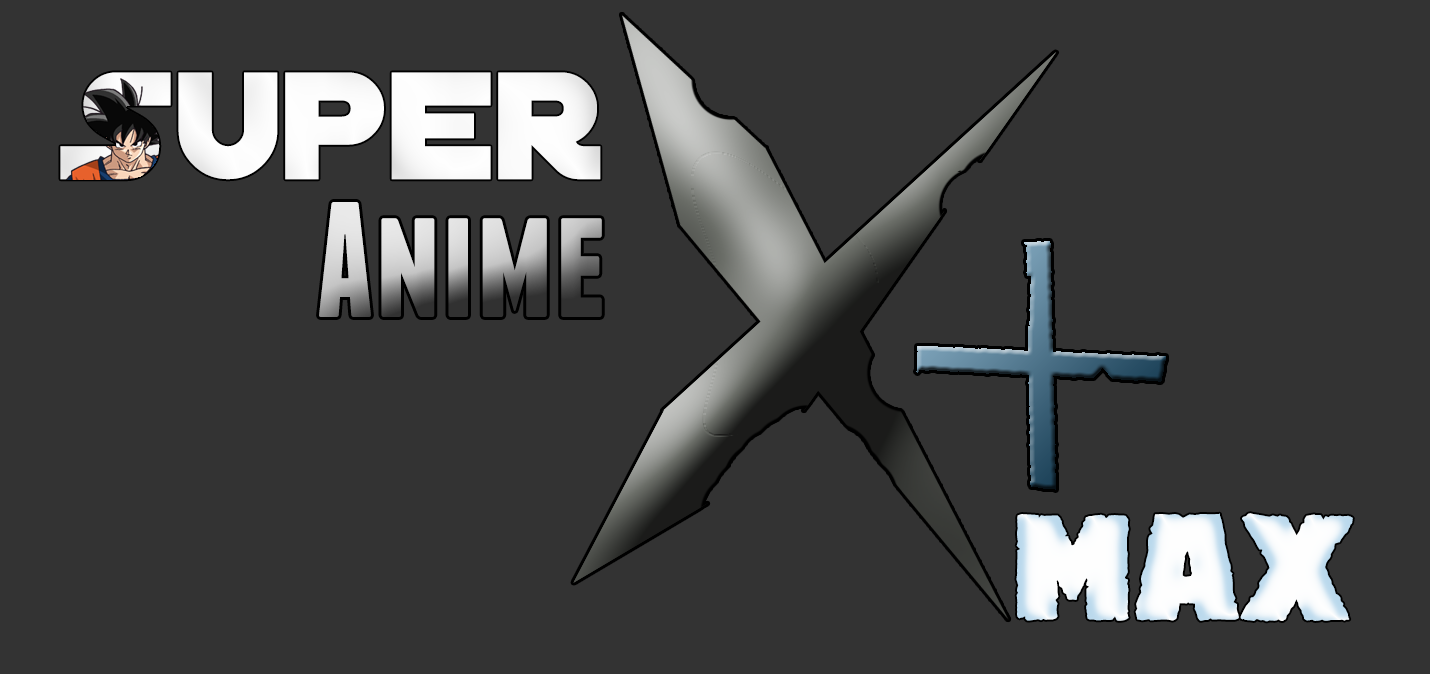
<style>
.page{position:relative;width:1430px;height:674px;background:#333333}
.page>*{position:absolute;margin:0}
.t1{font:164px "DistantGalaxy";color:#fefefe}
.t2{font:164px "FranchiseFree-Bold"}
.t3{font:164px "DestroyEarthBB";color:#fefefe}
</style>
<div class="page">
<p class="t1" style="left:60px;top:72px;width:541px;height:108px">Super</p>
<p class="t2" style="left:319px;top:202px;width:283px;height:115px">Anime</p>
<p class="t3" style="left:1016px;top:513px;width:337px;height:109px">MAX</p>
</div>
